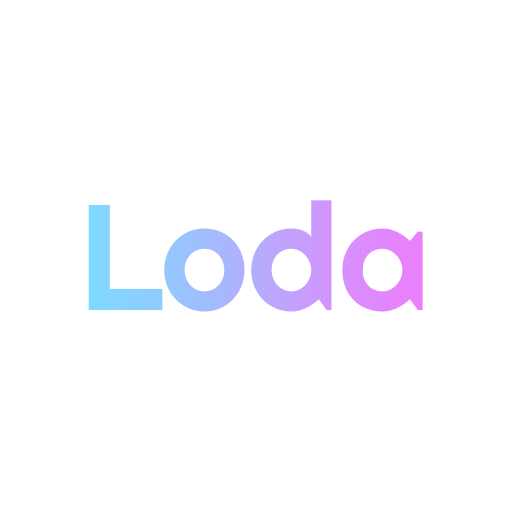
<style>
.page{position:relative;width:512px;height:512px;background:#ffffff}
.page>*{position:absolute;margin:0}
.t1{font:150px "Righteous-Regular"}
</style>
<div class="page">
<p class="t1" style="left:88px;top:200px;width:335px;height:112px">Loda</p>
</div>
